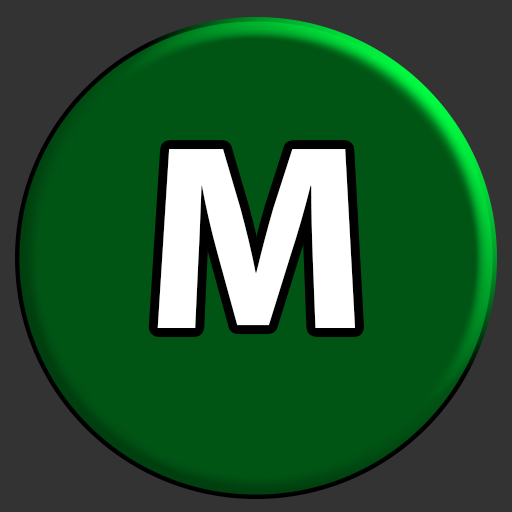
<style>
.page{position:relative;width:512px;height:512px;background:#005414}
.page>*{position:absolute;margin:0}
.t1{font:265.3px "MyriadPro-Bold";letter-spacing:0.075em;color:#ffffff}
</style>
<div class="page">
<p class="t1" style="left:157px;top:149px;width:198px;height:179px">M</p>
</div>
